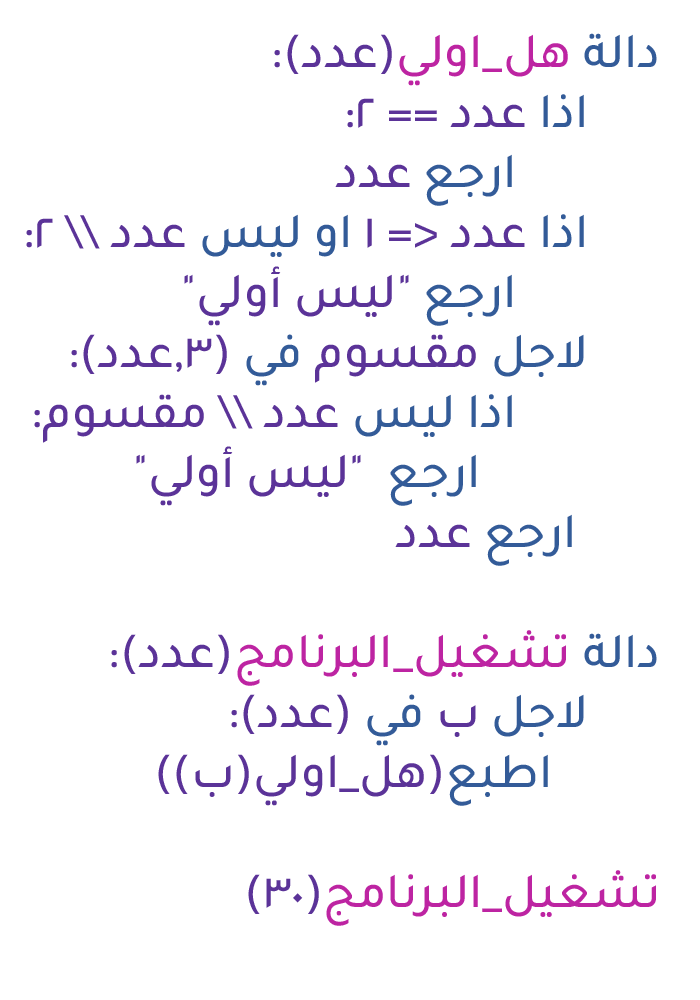
<style>
.page{position:relative;width:700px;height:1000px;background:#ffffff}
.page>*{position:absolute;margin:0}
.t1{font:50px "Tajawal-Medium";color:#bd24a2}
.t2{font:50px "Tajawal-Medium";color:#335b98}
.t3{font:50px "Tajawal-Medium";color:#5b3398}
</style>
<div class="page">
<p class="t1" style="left:26px;top:33px;width:631px;height:893px"><span class="t2">دالة </span>هل_اولي<span class="t3">(عدد):<br>  </span><span class="t2">اذا </span><span class="t3">عدد == 2:<br>    </span><span class="t2">ارجع </span><span class="t3">عدد<br>  </span><span class="t2">اذا </span><span class="t3">عدد &lt;= 1 </span><span class="t2">او ليس</span><span class="t3"> عدد \\ 2:<br>    </span><span class="t2">ارجع </span><span class="t3">"ليس أولي"<br>  </span><span class="t2">لاجل </span><span class="t3">مقسوم </span><span class="t2">في </span><span class="t3">(3,عدد):<br>   </span><span class="t2"> اذا ليس</span><span class="t3"> عدد \\ مقسوم:<br>     </span><span class="t2">ارجع  </span><span class="t3">"ليس أولي"<br>   </span><span class="t2">ارجع </span><span class="t3">عدد<br><br></span><span class="t2">دالة </span>تشغيل_البرنامج<span class="t3">(عدد):<br>  </span><span class="t2">لاجل </span><span class="t3">ب </span><span class="t2">في </span><span class="t3">(عدد):<br>   </span><span class="t2">اطبع</span><span class="t3">(هل_اولي(ب))<br><br></span>تشغيل_البرنامج<span class="t3">(30)</span></p>
</div>
